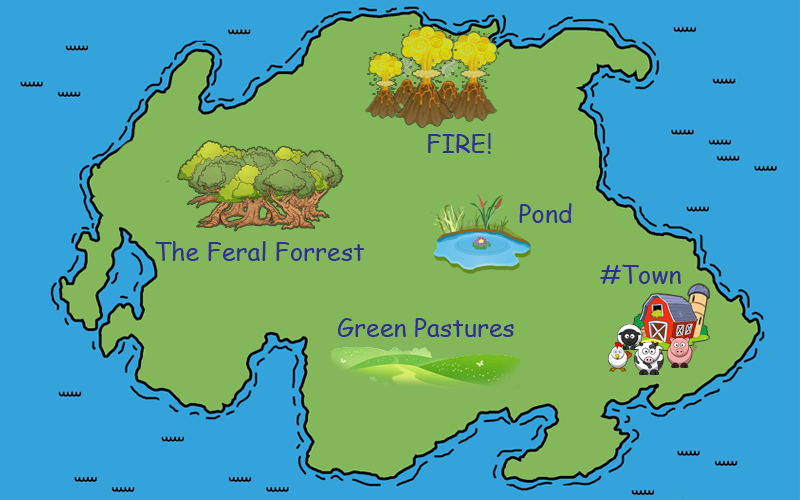
<style>
.page{position:relative;width:800px;height:500px;background:#34a3db}
.page>*{position:absolute;margin:0}
.t1{font:25px "ComicSansMS";color:#2e3192}
</style>
<div class="page">
<p class="t1" style="left:428px;top:133px;width:63px;height:21px">FIRE!</p>
<p class="t1" style="left:519px;top:203px;width:53px;height:20px">Pond</p>
<p class="t1" style="left:155px;top:241px;width:209px;height:20px">The Feral Forrest</p>
<p class="t1" style="left:600px;top:264px;width:81px;height:20px">#Town</p>
<p class="t1" style="left:338px;top:318px;width:176px;height:19px">Green Pastures</p>
</div>
